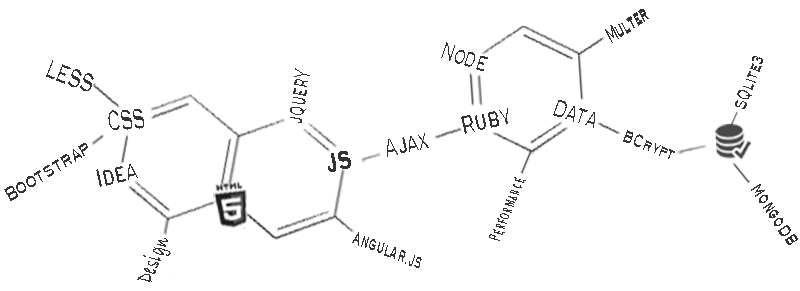
<style>
.page{position:relative;width:800px;height:291px;background:#ffffff}
.page>*{position:absolute;margin:0}
.t1{font:20.8px "BlairMdITCTTMedium";letter-spacing:0.1em;color:#333333;scale:0.39 1}
.t2{font:23.2px "BlairMdITCTTMedium";letter-spacing:0.1em;color:#333333;scale:0.5 1}
.t3{font:23.2px "BlairMdITCTTMedium";letter-spacing:0.1em;color:#333333;scale:0.54 1}
.t4{font:17px "BlairMdITCTTMedium";letter-spacing:0.1em;color:#333333;scale:0.53 1}
.t5{font:19.1px "BlairMdITCTTMedium";letter-spacing:0.1em;color:#333333;scale:0.48 1}
.t6{font:23.3px "BlairMdITCTTMedium";letter-spacing:0.1em;color:#333333;scale:0.48 1}
.t7{font:26.9px "BlairMdITCTTMedium";letter-spacing:0.1em;color:#333333;scale:0.44 1}
.t8{font:16.9px "BlairMdITCTTMedium";letter-spacing:0.1em;color:#333333;scale:0.54 1}
.t9{font:19px "BlairMdITCTTMedium";letter-spacing:0.1em;color:#333333;scale:0.59 1}
.t10{font:23.2px "BlairMdITCTTMedium";letter-spacing:0.1em;color:#333333;font-weight:bold;scale:0.54 1}
.t11{font:16.7px "CopperplateGothic-Light";letter-spacing:0.1em;color:#333333;scale:0.48 1}
.t12{font:16.6px "BlairMdITCTTMedium";letter-spacing:0.1em;color:#333333;scale:0.49 1}
.t13{font:25.4px "BradleyHandITCTT-Bold";letter-spacing:0.1em;color:#333333;scale:0.54 1}
</style>
<div class="page">
<p class="t1" style="left:605px;top:9px;width:44px;height:34px;rotate:-33deg">Multer</p>
<p class="t2" style="left:441px;top:42px;width:47px;height:29px;rotate:17deg">Node</p>
<p class="t3" style="left:46px;top:60px;width:48px;height:31px;rotate:21deg">LESS</p>
<p class="t4" style="left:735px;top:56px;width:28px;height:53px;rotate:-68deg">SQlite3</p>
<p class="t5" style="left:290px;top:68px;width:20px;height:55px;rotate:-81deg">jQuer<span class="t6">y</span></p>
<p class="t2" style="left:553px;top:100px;width:42px;height:28px;rotate:18deg">Data</p>
<p class="t7" style="left:108px;top:109px;width:36px;height:21px;rotate:-5deg">CSS</p>
<p class="t3" style="left:461px;top:108px;width:47px;height:26px;rotate:-13deg">Ruby</p>
<p class="t3" style="left:387px;top:133px;width:42px;height:24px;rotate:-13deg">Ajax</p>
<p class="t8" style="left:623px;top:130px;width:52px;height:29px;rotate:21deg">BCrypt</p>
<p class="t9" style="left:4px;top:143px;width:84px;height:58px;rotate:-31deg">Bootstrap</p>
<p class="t10" style="left:328px;top:151px;width:23px;height:21px;rotate:-13deg">JS</p>
<p class="t3" style="left:96px;top:164px;width:42px;height:23px;rotate:-13deg">Idea</p>
<p class="t11" style="left:489px;top:177px;width:37px;height:64px;rotate:-68deg">Performance</p>
<p class="t4" style="left:751px;top:184px;width:47px;height:61px;rotate:56deg">MongoDB</p>
<p class="t12" style="left:352px;top:232px;width:70px;height:36px;rotate:22deg">Angular.js</p>
<p class="t13" style="left:137px;top:238px;width:34px;height:44px;rotate:-66deg">Design</p>
</div>
